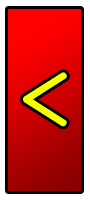
<style>
.page{position:relative;width:90px;height:200px}
.page>*{position:absolute;margin:0}
.t1{font:83.3px "wearealien!!";color:#f6ff00}
</style>
<div class="page">
<p class="t1" style="left:23px;top:72px;width:44px;height:55px">&lt;</p>
</div>
